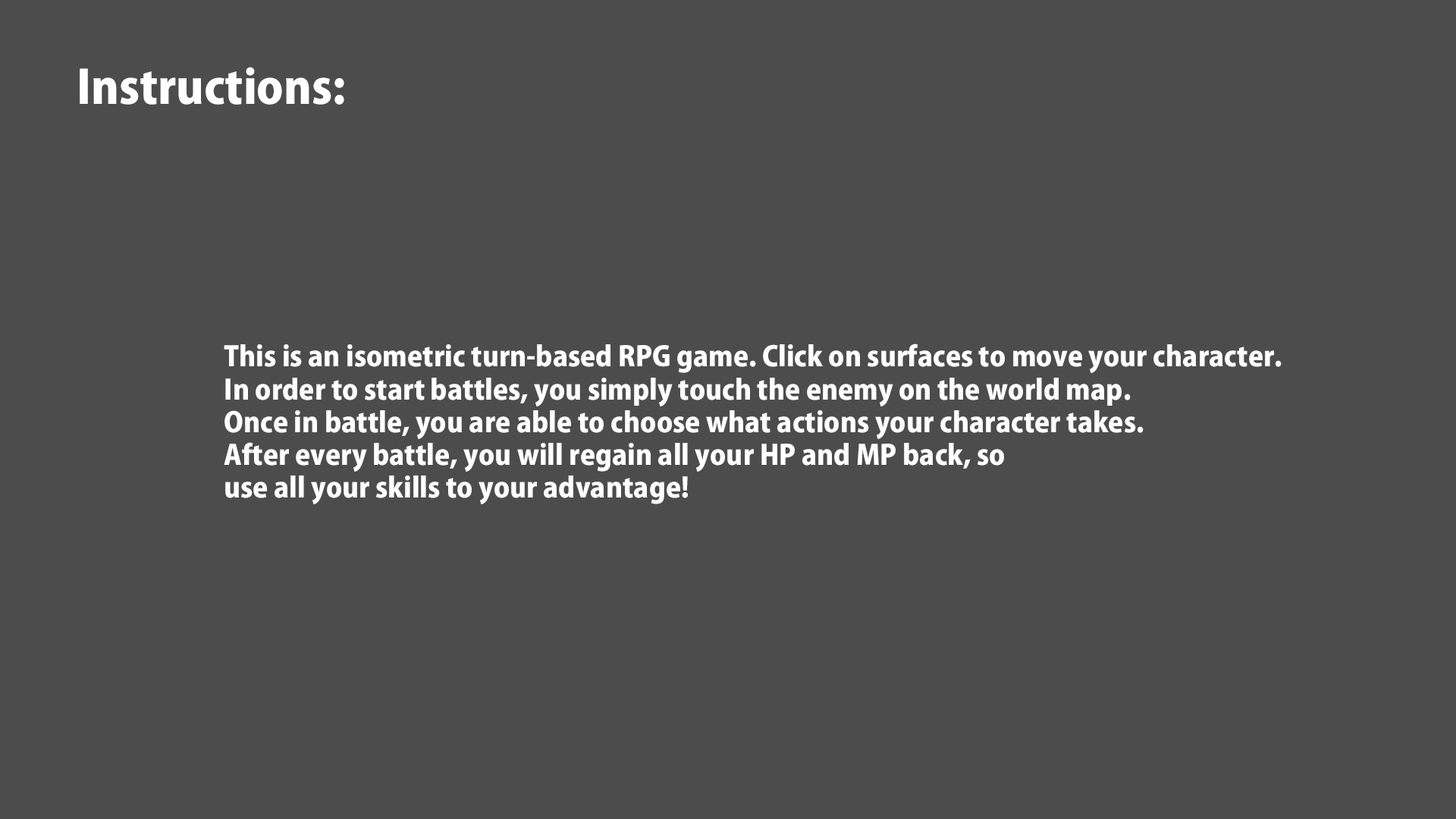
<style>
.page{position:relative;width:1456px;height:819px;background:#4c4c4c}
.page>*{position:absolute;margin:0}
.t1{font:45.5px "KozGoPr6N-Heavy";color:#ffffff}
.t2{font:27.3px "KozGoPr6N-Heavy";color:#ffffff}
</style>
<div class="page">
<p class="t1" style="left:80px;top:67px;width:264px;height:38px">Instructions:</p>
<p class="t2" style="left:224px;top:344px;width:1058px;height:160px">This is an isometric turn-based RPG game. Click on surfaces to move your character.<br>In order to start battles, you simply touch the enemy on the world map. <br>Once in battle, you are able to choose what actions your character takes. <br>After every battle, you will regain all your HP and MP back, so<br>use all your skills to your advantage!</p>
</div>
